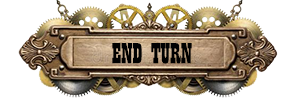
<style>
.page{position:relative;width:300px;height:100px;background:#ffffff}
.page>*{position:absolute;margin:0}
.t1{font:30px "Playbill";color:#010101}
</style>
<div class="page">
<p class="t1" style="left:112px;top:43px;width:80px;height:21px">END TURN</p>
</div>
